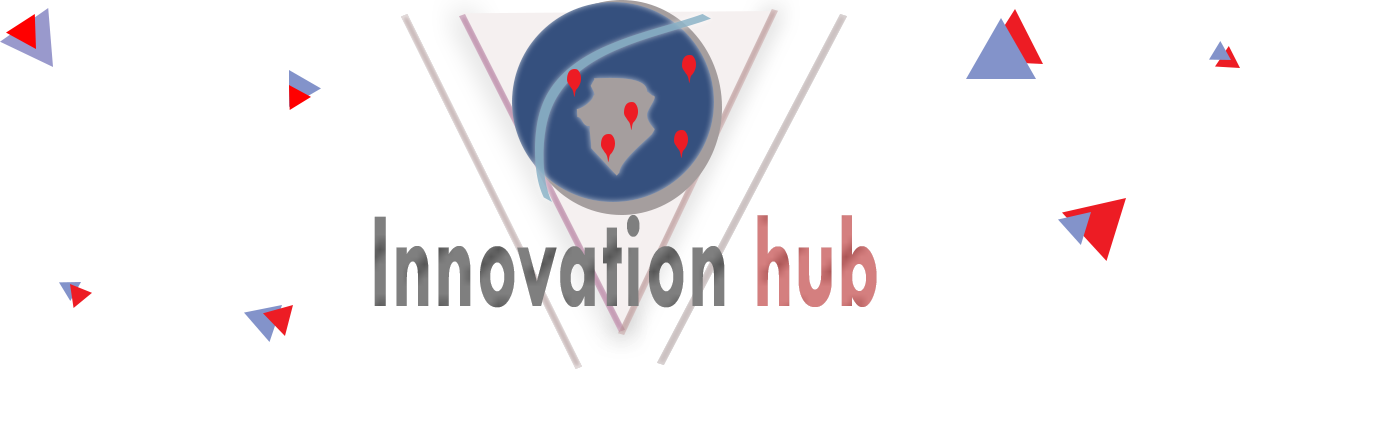
<style>
.page{position:relative;width:1376px;height:424px;background:#ffffff}
.page>*{position:absolute;margin:0}
.t1{font:139.3px "TwCenMT-Bold";letter-spacing:0.005em;scale:0.57 1}
</style>
<div class="page">
<p class="t1" style="left:374px;top:215px;width:503px;height:93px">Innovation hub</p>
</div>
